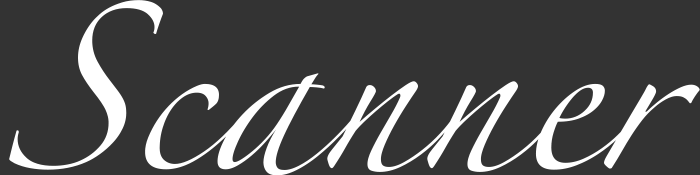
<style>
.page{position:relative;width:700px;height:175px;background:#333333}
.page>*{position:absolute;margin:0}
.t1{font:150.9px "Zapfino";color:#ffffff}
</style>
<div class="page">
<p class="t1" style="left:9px;top:0px;width:691px;height:176px">Scanner</p>
</div>
